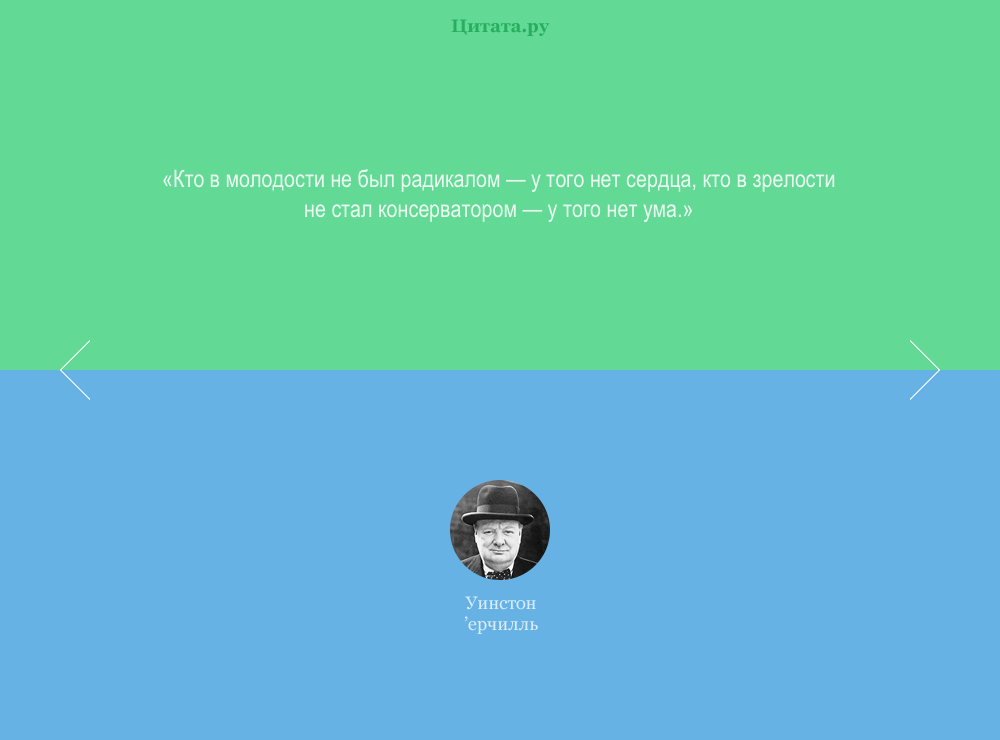
<style>
.page{position:relative;width:1000px;height:740px;background:#62d995}
.page>*{position:absolute;margin:0}
.t1{font:18px "Georgia-Bold";color:#27ae60}
.t2{font:24px/28.8px "ArialNarrow";color:#eafaf1}
.t3{font:18px/21.6px "Georgia";color:#d9ecf8}
</style>
<div class="page">
<p class="t1" style="left:451px;top:19px;width:99px;height:17px">Цитата.ру</p>
<p class="t2" style="left:163px;top:169px;width:672px;height:54px;text-align:center">«Кто в молодости не был радикалом — у того нет сердца, кто в зрелости <br>не стал консерватором — у того нет ума.»</p>
<p class="t3" style="left:464px;top:596px;width:74px;height:38px;text-align:center">Уинстон<br>’ерчилль</p>
</div>
